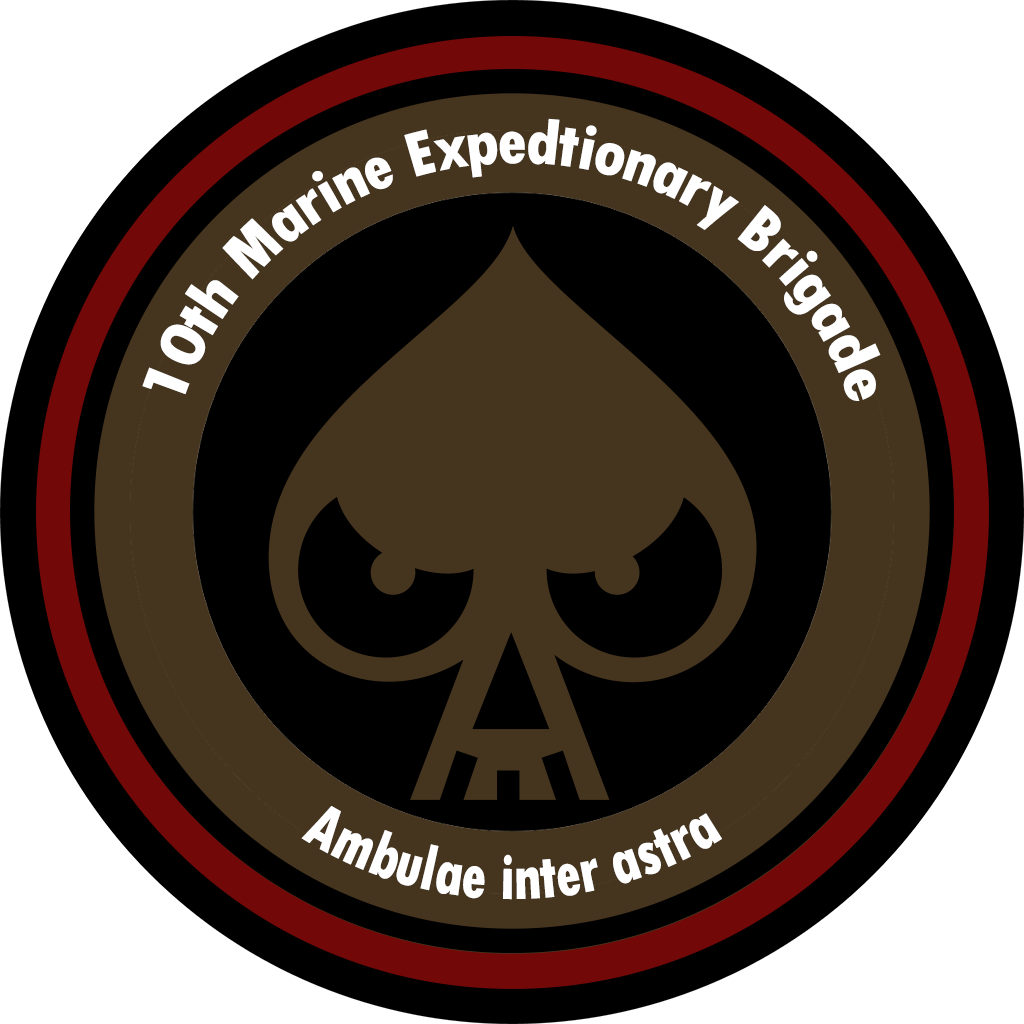
<style>
.page{position:relative;width:1024px;height:1024px;background:#000000}
.page>*{position:absolute;margin:0}
.t1{font:65.6px "TwCenMT-CondensedExtraBold";color:#ffffff;scale:0.74 1}
</style>
<div class="page">
<p class="t1" style="left:142px;top:118px;width:739px;height:283px;text-align:center">10th Marine Expedtionary Brigade</p>
<p class="t1" style="left:301px;top:806px;width:421px;height:94px">Ambulae inter astra</p>
</div>
